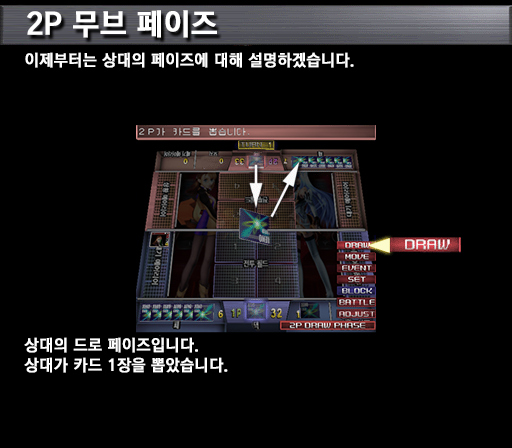
<style>
.page{position:relative;width:512px;height:448px;background:#000000}
.page>*{position:absolute;margin:0}
.t1{font:30px "KoreanGD15-R";color:#ffffff;font-weight:bold}
.t2{font:16px "KoreanGD15-R";color:#ffffff;font-weight:bold}
.t3{font:16px/20px "KoreanGD15-R";color:#ffffff;font-weight:bold}
</style>
<div class="page">
<p class="t1" style="left:27px;top:10px;width:190px;height:28px">2P 무브 페이즈</p>
<p class="t2" style="left:25px;top:52px;width:329px;height:16px">이제부터는 상대의 페이즈에 대해 설명하겠습니다.</p>
<p class="t3" style="left:24px;top:337px;width:204px;height:36px">상대의 드로 페이즈입니다.<br>상대가 카드 1장을 뽑았습니다.</p>
</div>
